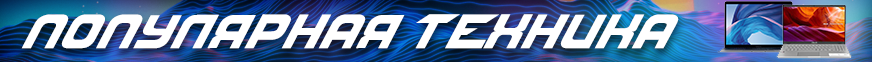
<style>
.page{position:relative;width:872px;height:62px;background:#ffffff}
.page>*{position:absolute;margin:0}
.t1{font:52.3px "NFSfont";letter-spacing:0.05em;color:#ffffff;scale:0.94 1}
</style>
<div class="page">
<p class="t1" style="left:21px;top:14px;width:658px;height:35px">ПОПУЛЯРНАЯ ТЕХНИКА</p>
</div>
